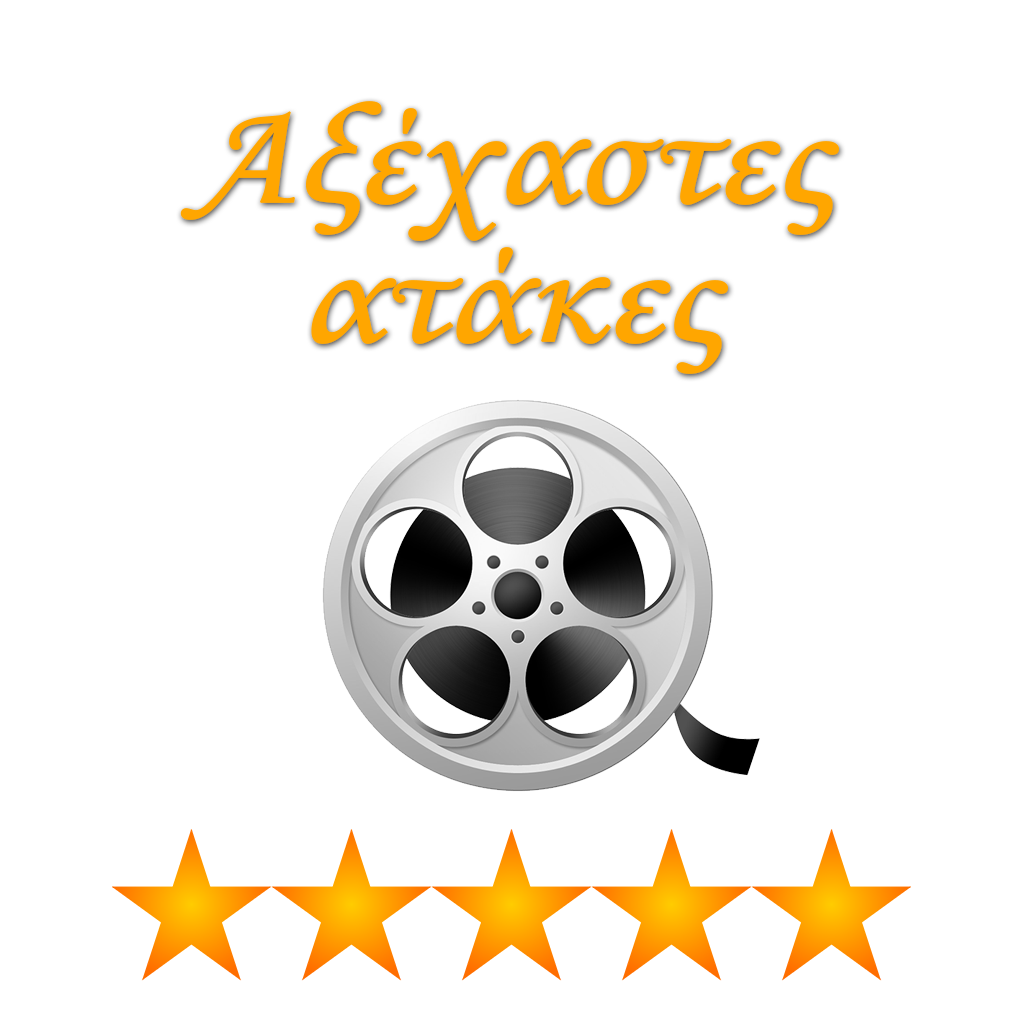
<style>
.page{position:relative;width:1024px;height:1024px;background:#ffffff}
.page>*{position:absolute;margin:0}
.t1{font:145.7px/138.8px "MonotypeCorsiva";letter-spacing:-0.02em;color:#ffa600;font-weight:bold;scale:1.13 1}
</style>
<div class="page">
<p class="t1" style="left:180px;top:101px;width:659px;height:273px;text-align:center">Αξέχαστες<br>ατάκες</p>
</div>
